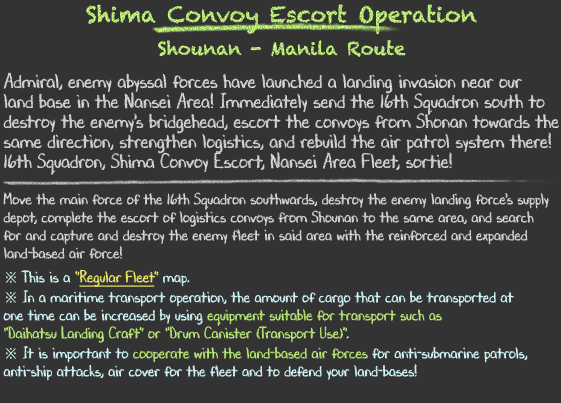
<style>
.page{position:relative;width:561px;height:403px;background:#333333}
.page>*{position:absolute;margin:0}
.t1{font:22px/36px "Chalkduster"}
.t2{font:18px/36px "Chalkduster"}
.t3{font:20px/20px "DJBChalkItUp";color:#d9ded6;scale:0.9 1}
.t4{font:16px/18px "DJBChalkItUp";color:#d9ded6;scale:0.9 1}
.t5{font:16px/24px "DJBChalkItUp";color:#d9ded6;scale:0.9 1}
.t6{font:16px/20px "TimesNewRomanPSMT";color:#d7feff;scale:0.9 1}
.t7{font:16px/20px "DJBChalkItUp";color:#d7feff;scale:0.9 1}
.t8{font:16px/20px "DJBChalkItUp";color:#f5ed68;scale:0.9 1}
.t9{font:16px/20px "DJBChalkItUp";color:#f5ed68;text-decoration:underline;scale:0.9 1}
.t10{font:16px/18px "TimesNewRomanPSMT";color:#d7feff;scale:0.9 1}
.t11{font:16px/18px "DJBChalkItUp";color:#d7feff;scale:0.9 1}
.t12{font:16px/18px "DJBChalkItUp";color:#bdef78;scale:0.9 1}
.t13{font:16px/20px "DJBChalkItUp";color:#bdef78;scale:0.9 1}
</style>
<div class="page">
<p class="t1" style="left:86px;top:4px;width:391px;height:53px;text-align:center">Shima Convoy Escort Operation<br><span class="t2">Shounan - Manila Route</span></p>
<p class="t3" style="left:3px;top:72px;width:556px;height:309px">Admiral, enemy abyssal forces have launched a landing invasion near our<br>land base in the Nansei Area! Immediately send the 16th Squadron south to<br>destroy the enemy's bridgehead, escort the convoys from Shonan towards the<br>same direction, strengthen logistics, and rebuild the air patrol system there!<br>16th Squadron, Shima Convoy Escort, Nansei Area Fleet, sortie!<br><br><span class="t4">Move the main force of the 16th Squadron southwards, destroy the enemy landing force's supply<br>depot, complete the escort of logistics convoys from Shounan to the same area, and search<br>for and capture and destroy the enemy fleet in said area with the reinforced and expanded<br></span><span class="t5">land-based air force!<br></span><span class="t6">※ </span><span class="t7">This is a </span><span class="t8">"</span><span class="t9">Regular Fleet</span><span class="t8">"</span><span class="t7"> map.<br></span><span class="t10">※</span><span class="t11"> In a maritime transport operation, the amount of cargo that can be transported at<br>one time can be increased by using </span><span class="t12">equipment suitable for transport such as<br></span><span class="t13">“Daihatsu Landing Craft” or “Drum Canister (Transport Use)”</span><span class="t7">.<br></span><span class="t10">※</span><span class="t11"> It is important to </span><span class="t12">cooperate with the land-based air forces</span><span class="t11"> for anti-submarine patrols,<br>anti-ship attacks, air cover for the fleet and to defend your land-bases!</span></p>
</div>
